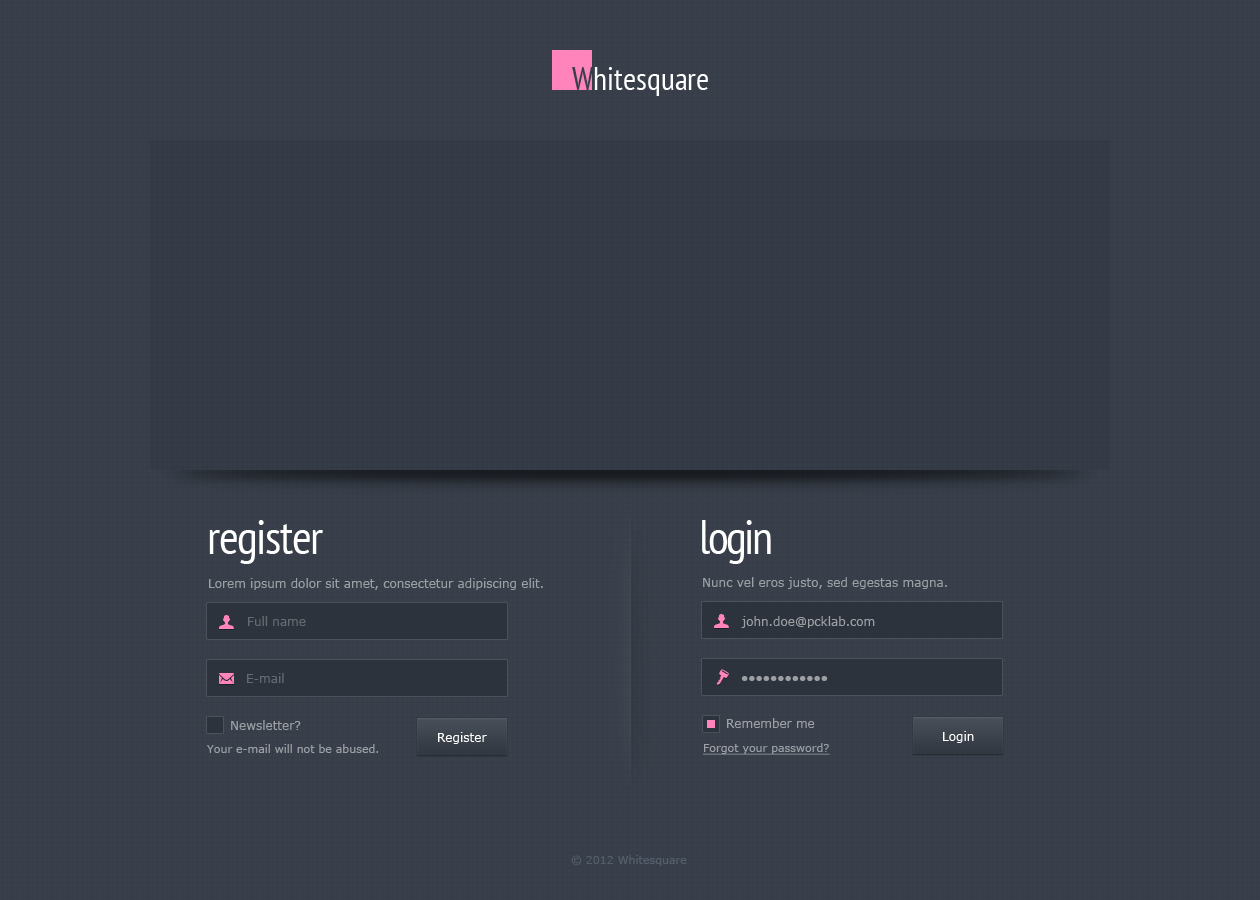
<style>
.page{position:relative;width:1260px;height:900px;background:#39404b}
.page>*{position:absolute;margin:0}
.t1{font:48px "PTSans-Narrow";letter-spacing:-0.03em;color:#ffffff}
.t2{font:48px "PTSans-Narrow";letter-spacing:-0.05em;color:#ffffff}
.t3{font:12px "Verdana";color:#9ca0a5}
.t4{font:12px "Verdana";color:#656a71}
.t5{font:12px "Verdana";color:#ffffff}
.t6{font:11px "Verdana";color:#9ca0a5}
.t7{font:11px "Verdana";color:#9ca0a5;text-decoration:underline}
.t8{font:11px "Verdana";color:#545f6e}
</style>
<div class="page">
<p class="t1" style="left:209px;top:520px;width:114px;height:44px">register</p>
<p class="t2" style="left:702px;top:520px;width:69px;height:44px">login</p>
<p class="t3" style="left:209px;top:578px;width:334px;height:12px">Lorem ipsum dolor sit amet, consectetur adipiscing elit.</p>
<p class="t3" style="left:703px;top:577px;width:244px;height:12px">Nunc vel eros justo, sed egestas magna.</p>
<p class="t4" style="left:248px;top:616px;width:58px;height:10px">Full name</p>
<p class="t3" style="left:741px;top:616px;width:134px;height:12px">john.doe@pcklab.com</p>
<p class="t4" style="left:247px;top:673px;width:37px;height:10px">E-mail</p>
<p class="t3" style="left:741px;top:676px;width:87px;height:5px">●●●●●●●●●●●●</p>
<p class="t3" style="left:231px;top:720px;width:70px;height:10px">Newsletter?</p>
<p class="t3" style="left:727px;top:718px;width:88px;height:10px">Remember me</p>
<p class="t5" style="left:438px;top:732px;width:49px;height:12px">Register</p>
<p class="t5" style="left:943px;top:731px;width:31px;height:12px">Login</p>
<p class="t6" style="left:207px;top:744px;width:171px;height:9px">Your e-mail will not be abused.</p>
<p class="t7" style="left:703px;top:743px;width:127px;height:12px">Forgot your password?</p>
<p class="t8" style="left:571px;top:855px;width:116px;height:11px">© 2012 Whitesquare</p>
</div>
